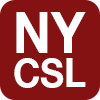
<style>
.page{position:relative;width:100px;height:100px;background:#841212}
.page>*{position:absolute;margin:0}
.t1{font:40.4px/33.1px "HelveticaNeue-Bold";color:#ffffff;scale:0.91 1}
.t2{font:56.6px/33.1px "HelveticaNeue-Bold";color:#ffffff;scale:0.91 1}
</style>
<div class="page">
<p class="t1" style="left:14px;top:12px;width:72px;height:76px;text-align:center"><span class="t2">NY<br></span>CSL</p>
</div>
